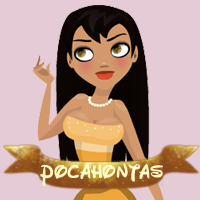
<style>
.page{position:relative;width:200px;height:200px;background:#e4cbd6}
.page>*{position:absolute;margin:0}
.t1{font:37.4px "Waltograph";color:#fcfac7}
</style>
<div class="page">
<p class="t1" style="left:40px;top:163px;width:123px;height:23px">pocahontas</p>
</div>
